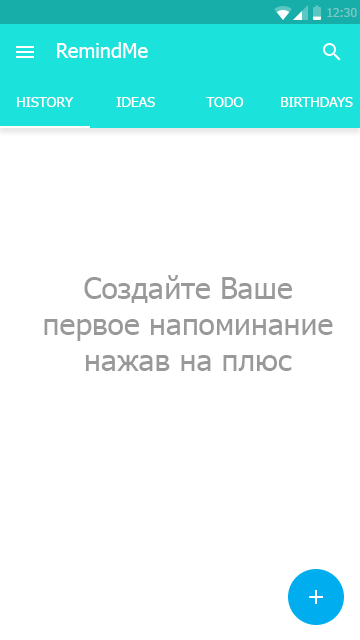
<style>
.page{position:relative;width:360px;height:640px;background:#ffffff}
.page>*{position:absolute;margin:0}
.t1{font:12px "Tahoma";color:#7bc8c5}
.t2{font:20px "Tahoma";color:#fffefe}
.t3{font:14px "Tahoma";color:#fffefe}
.t4{font:30px "Tahoma";color:#999999}
</style>
<div class="page">
<p class="t1" style="left:327px;top:8px;width:30px;height:9px">12:30</p>
<p class="t2" style="left:57px;top:42px;width:91px;height:16px">RemindMe</p>
<p class="t3" style="left:17px;top:97px;width:57px;height:10px">HISTORY</p>
<p class="t3" style="left:116px;top:97px;width:39px;height:10px">IDEAS</p>
<p class="t3" style="left:206px;top:97px;width:38px;height:10px">TODO</p>
<p class="t3" style="left:281px;top:97px;width:72px;height:10px">BIRTHDAYS</p>
<p class="t4" style="left:44px;top:275px;width:289px;height:96px;text-align:center">Создайте Ваше <br>первое напоминание <br>нажав на плюс</p>
</div>
